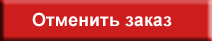
<style>
.page{position:relative;width:213px;height:41px;background:#ce1d1d}
.page>*{position:absolute;margin:0}
.t1{font:18px "Arial-BoldMT";color:#ffffff}
</style>
<div class="page">
<p class="t1" style="left:32px;top:12px;width:140px;height:15px">Отменить заказ</p>
</div>
